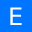
<style>
.page{position:relative;width:32px;height:32px;background:#0075ff}
.page>*{position:absolute;margin:0}
.t1{font:24px "DejaVuSans";color:#ffffff}
</style>
<div class="page">
<p class="t1" style="left:10px;top:7px;width:12px;height:18px">E</p>
</div>
